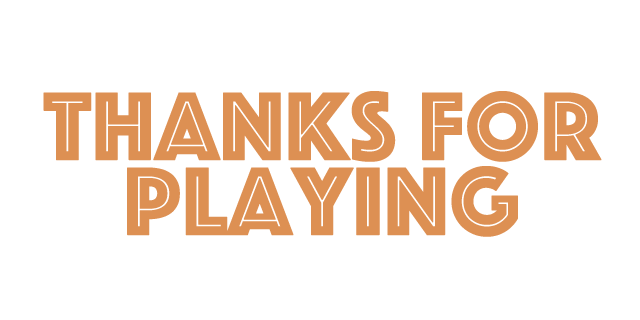
<style>
.page{position:relative;width:640px;height:320px;background:#ffffff}
.page>*{position:absolute;margin:0}
.t1{font:100px/75px "Phosphate-Inline";letter-spacing:-0.01em;color:#dd9053;font-weight:bold}
</style>
<div class="page">
<p class="t1" style="left:43px;top:91px;width:559px;height:146px;text-align:center">Thanks For<br>Playing</p>
</div>
